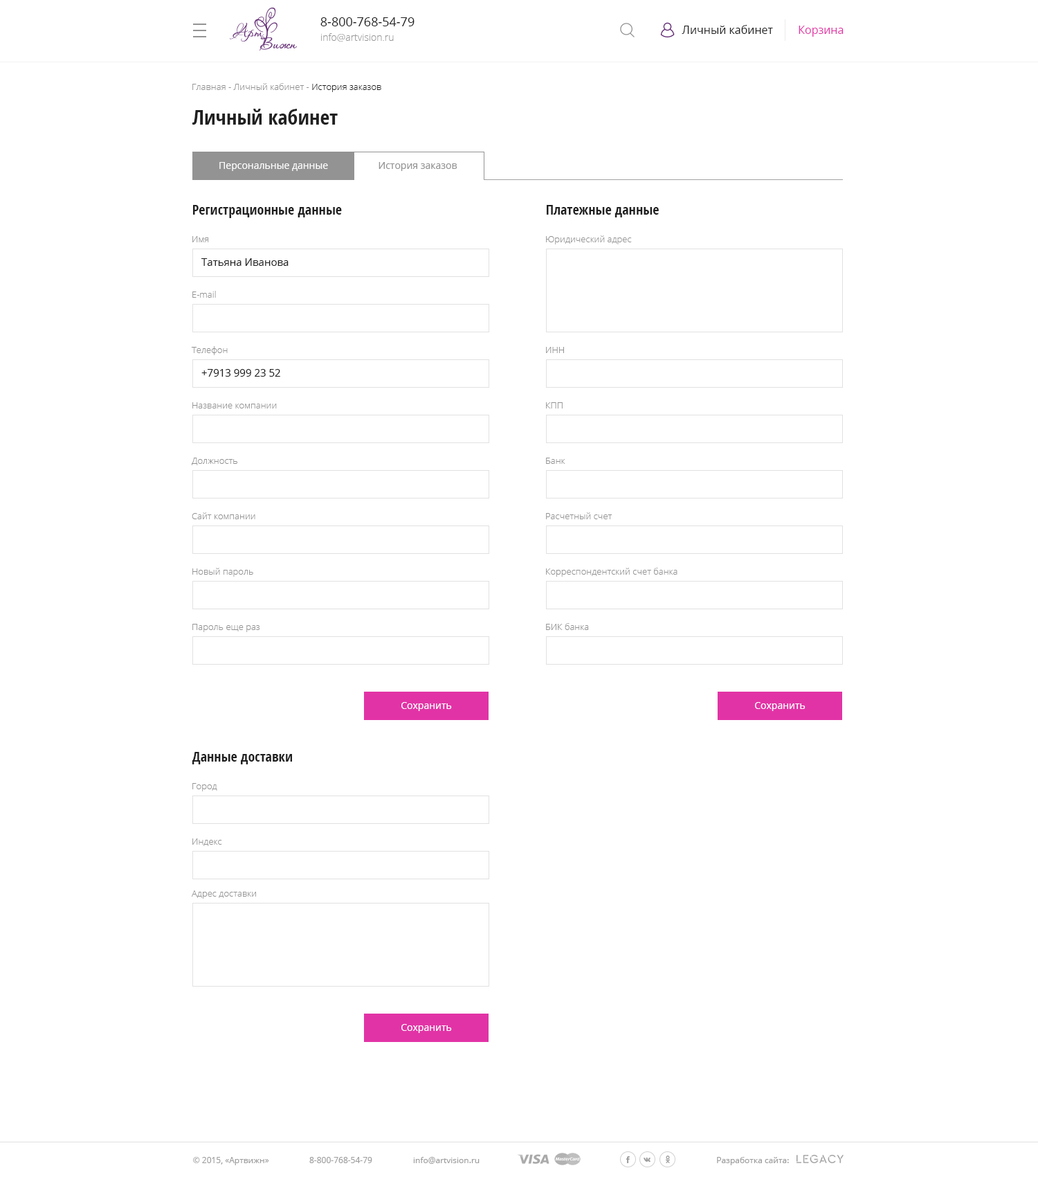
<style>
.page{position:relative;width:1038px;height:1177px;background:#ffffff}
.page>*{position:absolute;margin:0}
.t1{font:12.5px "OpenSans";color:#202020}
.t2{font:11.1px "OpenSans";color:#202020}
.t3{font:11.1px "OpenSans";color:#e233a6}
.t4{font:9.7px "OpenSans-Light";color:#999999}
.t5{font:9px "OpenSans-Light";color:#939393}
.t6{font:9px "OpenSans-Light";color:#202020}
.t7{font:20.8px "OpenSans-CondensedBold";color:#202020}
.t8{font:9.7px "OpenSans";color:#ffffff}
.t9{font:9.7px "OpenSans";color:#939393}
.t10{font:13.8px "OpenSans-CondensedBold";color:#202020}
.t11{font:10.4px "OpenSans";color:#202020}
.t12{font:8.3px "OpenSans";color:#9e9d9d}
</style>
<div class="page">
<p class="t1" style="left:321px;top:17px;width:94px;height:9px">8-800-768-54-79</p>
<p class="t2" style="left:682px;top:25px;width:91px;height:9px">Личный кабинет</p>
<p class="t3" style="left:799px;top:26px;width:45px;height:11px">Корзина</p>
<p class="t4" style="left:321px;top:33px;width:73px;height:9px">info@artvision.ru</p>
<p class="t5" style="left:192px;top:83px;width:189px;height:9px">Главная - Личный кабинет - <span class="t6">История заказов</span></p>
<p class="t7" style="left:192px;top:109px;width:146px;height:16px">Личный кабинет</p>
<p class="t8" style="left:219px;top:162px;width:109px;height:9px">Персональные данные</p>
<p class="t9" style="left:379px;top:162px;width:79px;height:9px">История заказов</p>
<p class="t10" style="left:193px;top:205px;width:149px;height:13px">Регистрационные данные</p>
<p class="t10" style="left:547px;top:205px;width:112px;height:12px">Платежные данные</p>
<p class="t5" style="left:192px;top:236px;width:17px;height:6px">Имя</p>
<p class="t5" style="left:546px;top:235px;width:86px;height:9px">Юридический адрес</p>
<p class="t11" style="left:201px;top:258px;width:88px;height:8px">Татьяна Иванова</p>
<p class="t5" style="left:192px;top:291px;width:24px;height:7px">E-mail</p>
<p class="t5" style="left:191px;top:346px;width:37px;height:9px">Телефон</p>
<p class="t5" style="left:546px;top:347px;width:18px;height:6px">ИНН</p>
<p class="t11" style="left:201px;top:369px;width:79px;height:8px">+7913 999 23 52</p>
<p class="t5" style="left:192px;top:402px;width:85px;height:6px">Название компании</p>
<p class="t5" style="left:546px;top:402px;width:17px;height:6px">КПП</p>
<p class="t5" style="left:192px;top:458px;width:45px;height:7px">Должность</p>
<p class="t5" style="left:546px;top:458px;width:20px;height:6px">Банк</p>
<p class="t5" style="left:192px;top:512px;width:63px;height:7px">Сайт компании</p>
<p class="t5" style="left:546px;top:512px;width:67px;height:7px">Расчетный счет</p>
<p class="t5" style="left:192px;top:568px;width:61px;height:9px">Новый пароль</p>
<p class="t5" style="left:546px;top:568px;width:132px;height:9px">Корреспондентский счет банка</p>
<p class="t5" style="left:192px;top:624px;width:68px;height:8px">Пароль еще раз</p>
<p class="t5" style="left:546px;top:623px;width:43px;height:7px">БИК банка</p>
<p class="t8" style="left:402px;top:702px;width:50px;height:9px">Сохранить</p>
<p class="t8" style="left:755px;top:702px;width:51px;height:9px">Сохранить</p>
<p class="t10" style="left:192px;top:752px;width:100px;height:12px">Данные доставки</p>
<p class="t5" style="left:192px;top:783px;width:25px;height:8px">Город</p>
<p class="t5" style="left:192px;top:838px;width:30px;height:8px">Индекс</p>
<p class="t5" style="left:192px;top:890px;width:64px;height:9px">Адрес доставки</p>
<p class="t8" style="left:402px;top:1024px;width:50px;height:9px">Сохранить</p>
<p class="t12" style="left:193px;top:1157px;width:76px;height:8px">© 2015, «Артвижн»</p>
<p class="t12" style="left:309px;top:1157px;width:63px;height:6px">8-800-768-54-79</p>
<p class="t12" style="left:413px;top:1157px;width:67px;height:7px">info@artvision.ru</p>
<p class="t12" style="left:717px;top:1157px;width:72px;height:8px">Разработка сайта:</p>
</div>
